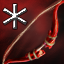
<style>
.page{position:relative;width:64px;height:64px}
.page>*{position:absolute;margin:0}
.t1{font:55px "Tahoma"}
</style>
<div class="page">
<p class="t1" style="left:3px;top:4px;width:24px;height:25px">*</p>
</div>
